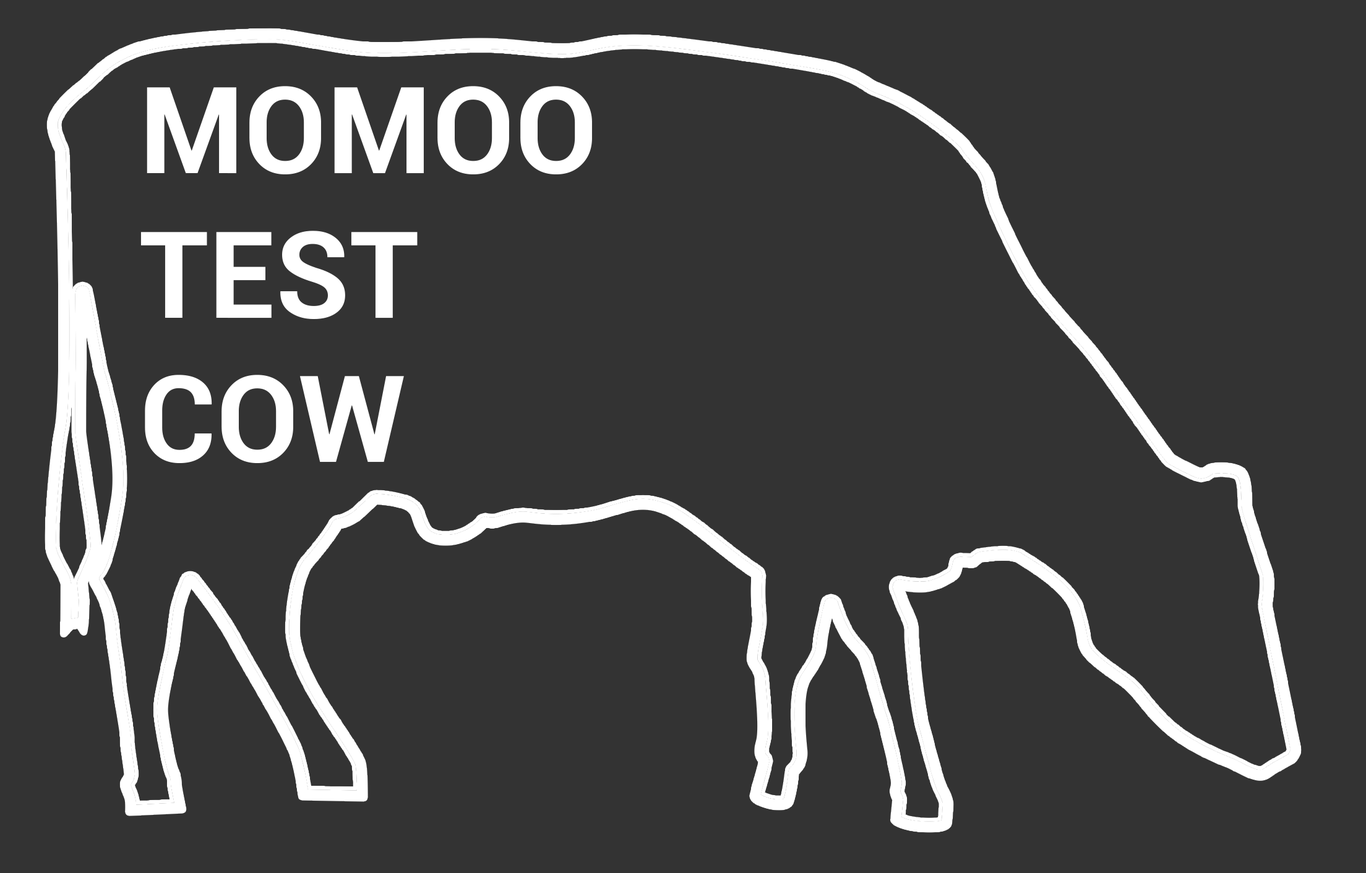
<style>
.page{position:relative;width:1366px;height:873px;background:#333333}
.page>*{position:absolute;margin:0}
.t1{font:120.4px "Roboto-Bold";color:#ffffff}
</style>
<div class="page">
<p class="t1" style="left:140px;top:86px;width:452px;height:377px">MOMOO <br>TEST<br>COW</p>
</div>
